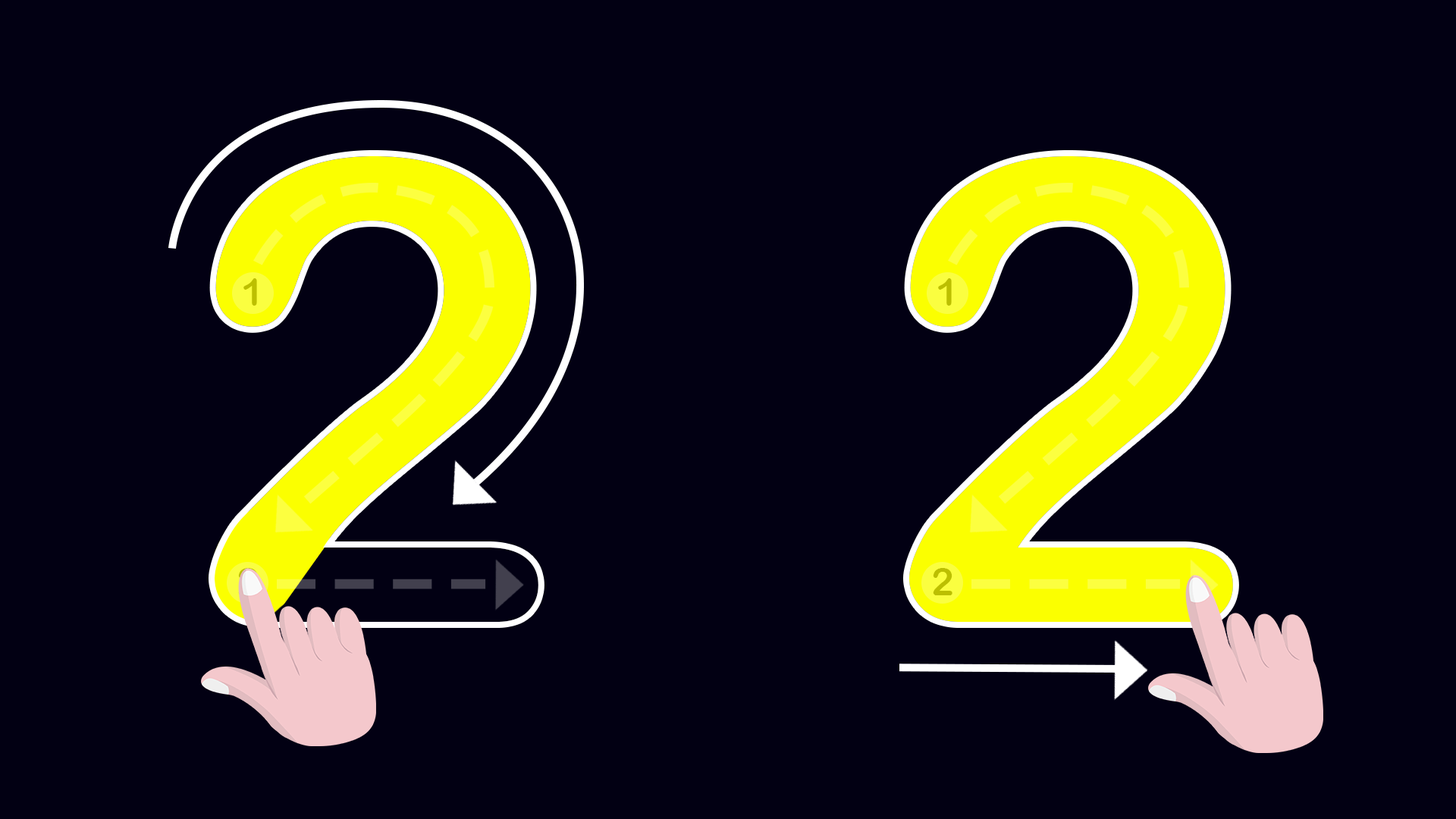
<style>
.page{position:relative;width:1456px;height:819px;background:#020013}
.page>*{position:absolute;margin:0}
.t1{font:646.7px "ArialRoundedMTBold"}
.t2{font:646.7px "ArialRoundedMTBold";color:#fbff00}
.t3{font:38px "ArialRoundedMTBold";color:#bcbf00}
</style>
<div class="page">
<p class="t1" style="left:215px;top:156px;width:323px;height:466px">2</p>
<p class="t2" style="left:909px;top:156px;width:324px;height:466px">2</p>
<p class="t2" style="left:909px;top:156px;width:324px;height:466px">2</p>
<p class="t3" style="left:243px;top:278px;width:14px;height:28px">1</p>
<p class="t3" style="left:938px;top:278px;width:14px;height:28px">1</p>
<p class="t3" style="left:933px;top:568px;width:19px;height:27px">2</p>
</div>
